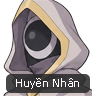
<style>
.page{position:relative;width:96px;height:96px;background:#ffffff}
.page>*{position:absolute;margin:0}
.t1{font:11px "Tahoma";letter-spacing:0.05em;color:#ffffff}
</style>
<div class="page">
<p class="t1" style="left:16px;top:78px;width:63px;height:11px">Huyền Nhân</p>
</div>
